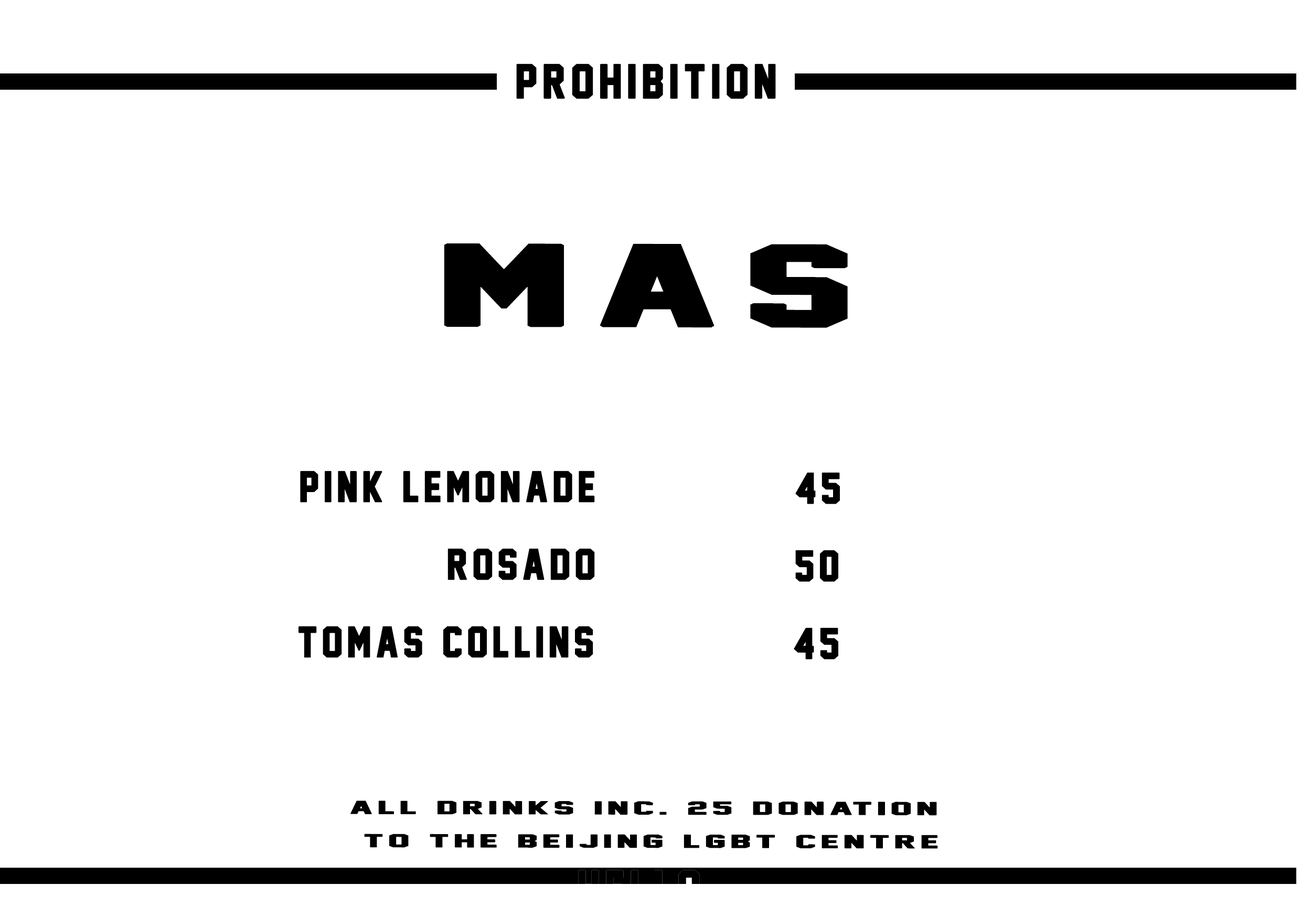
<style>
.page{position:relative;width:1301px;height:917px;background:#ffffff}
.page>*{position:absolute;margin:0}
.t1{font:43.7px "JerseyM54";letter-spacing:0.1em;color:#000000;font-weight:bold}
.t2{font:104.9px "JerseyM54";letter-spacing:0.1em;color:#000000;font-weight:bold;scale:2.04 1}
.t3{font:39.3px "JerseyM54";letter-spacing:0.1em;color:#000000;font-weight:bold}
.t4{font:39.6px "JerseyM54";letter-spacing:0.1em;color:#000000;font-weight:bold}
.t5{font:16.8px/33.2px "JerseyM54";letter-spacing:0.1em;color:#000000;font-weight:bold;scale:2.4 1}
</style>
<div class="page">
<p class="t1" style="left:516px;top:63px;width:260px;height:36px">prohibition</p>
<p class="t2" style="left:444px;top:243px;width:404px;height:85px">Mas</p>
<p class="t3" style="left:300px;top:470px;width:295px;height:32px">pink lemonade</p>
<p class="t4" style="left:795px;top:472px;width:45px;height:32px">45</p>
<p class="t3" style="left:447px;top:548px;width:148px;height:32px">rosado</p>
<p class="t4" style="left:795px;top:550px;width:43px;height:32px">50</p>
<p class="t3" style="left:298px;top:626px;width:295px;height:32px">tomas collins</p>
<p class="t4" style="left:794px;top:627px;width:44px;height:32px">45</p>
<p class="t5" style="left:350px;top:800px;width:588px;height:49px;text-align:center">all drinks inc. 25 donation<br> to the beijing lgbt centre</p>
</div>
